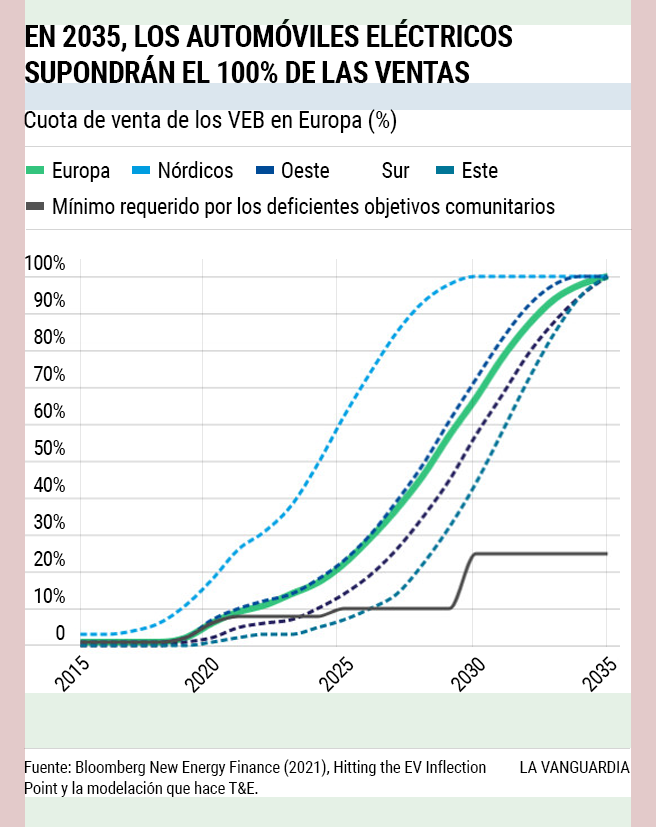
<style>
.page{position:relative;width:656px;height:827px;background:#ffffff}
.page>*{position:absolute;margin:0}
.t1{font:30px/36px "RobotoCondensed-Bold";letter-spacing:-0.02em;color:#000000;text-transform:uppercase}
.t2{font:24px "RobotoCondensed-Regular";letter-spacing:-0.01em;color:#000000}
.t3{font:22px "RobotoCondensed-Regular";letter-spacing:-0.014em;color:#000000}
.t4{font:21px/37px "RobotoCondensed-Regular";letter-spacing:-0.04em;color:#000000}
.t5{font:21px "RobotoCondensed-Regular";letter-spacing:-0.04em;color:#000000}
.t6{font:17px/21px "RobotoCondensed-Regular";letter-spacing:-0.014em;color:#000000}
.t7{font:17px "RobotoCondensed-Regular";letter-spacing:-0.014em;color:#000000}
</style>
<div class="page">
<p class="t1" style="left:25px;top:19px;width:488px;height:64px">en 2035, los automóviles eléctricos <br>supondrán el 100% de las ventas</p>
<p class="t2" style="left:24px;top:109px;width:373px;height:25px">Cuota de venta de los VEB en Europa (%)</p>
<p class="t3" style="left:53px;top:161px;width:445px;height:21px">Europa          Nórdicos          Oeste           Sur           Este</p>
<p class="t3" style="left:53px;top:197px;width:502px;height:21px">Mínimo requerido por los deficientes objetivos comunitarios</p>
<p class="t4" style="left:25px;top:255px;width:40px;height:385px;text-align:right">100%<br>90%<br>80%<br>70%<br>60%<br>50%<br>40%<br>30%<br>20%<br>10%<br>0</p>
<p class="t5" style="left:54px;top:655px;width:35px;height:38px;rotate:-45deg">2015</p>
<p class="t5" style="left:184px;top:657px;width:35px;height:37px;rotate:-45deg">2020</p>
<p class="t5" style="left:319px;top:656px;width:35px;height:37px;rotate:-45deg">2025</p>
<p class="t5" style="left:451px;top:657px;width:34px;height:36px;rotate:-45deg">2030</p>
<p class="t5" style="left:582px;top:656px;width:35px;height:37px;rotate:-45deg">2035</p>
<p class="t6" style="left:24px;top:759px;width:462px;height:38px">Fuente: Bloomberg New Energy Finance (2021), Hitting the EV Inflection Point y la modelación que hace T&amp;E.</p>
<p class="t7" style="left:520px;top:761px;width:110px;height:12px">LA VANGUARDIA</p>
</div>
